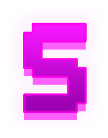
<style>
.page{position:relative;width:108px;height:138px}
.page>*{position:absolute;margin:0}
.t1{font:141px "Super-Smash-TV";letter-spacing:0.04em}
</style>
<div class="page">
<p class="t1" style="left:24px;top:23px;width:62px;height:89px">S</p>
</div>
